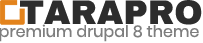
<style>
.page{position:relative;width:203px;height:43px;background:#ffffff}
.page>*{position:absolute;margin:0}
.t1{font:34px "ArchivoBlack-Regular";color:#2d2d2d}
.t2{font:16px "Poppins-Regular";color:#7e7e7e}
</style>
<div class="page">
<p class="t1" style="left:20px;top:0px;width:182px;height:25px">TARAPRO</p>
<p class="t2" style="left:0px;top:24px;width:199px;height:18px">premium drupal 8 theme</p>
</div>
